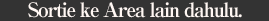
<style>
.page{position:relative;width:269px;height:21px;background:#333333}
.page>*{position:absolute;margin:0}
.t1{font:20px "RyuminPro-ExBold";letter-spacing:-0.08em;color:#fff7f3}
</style>
<div class="page">
<p class="t1" style="left:28px;top:2px;width:214px;height:16px">Sortie ke Area lain dahulu.</p>
</div>
